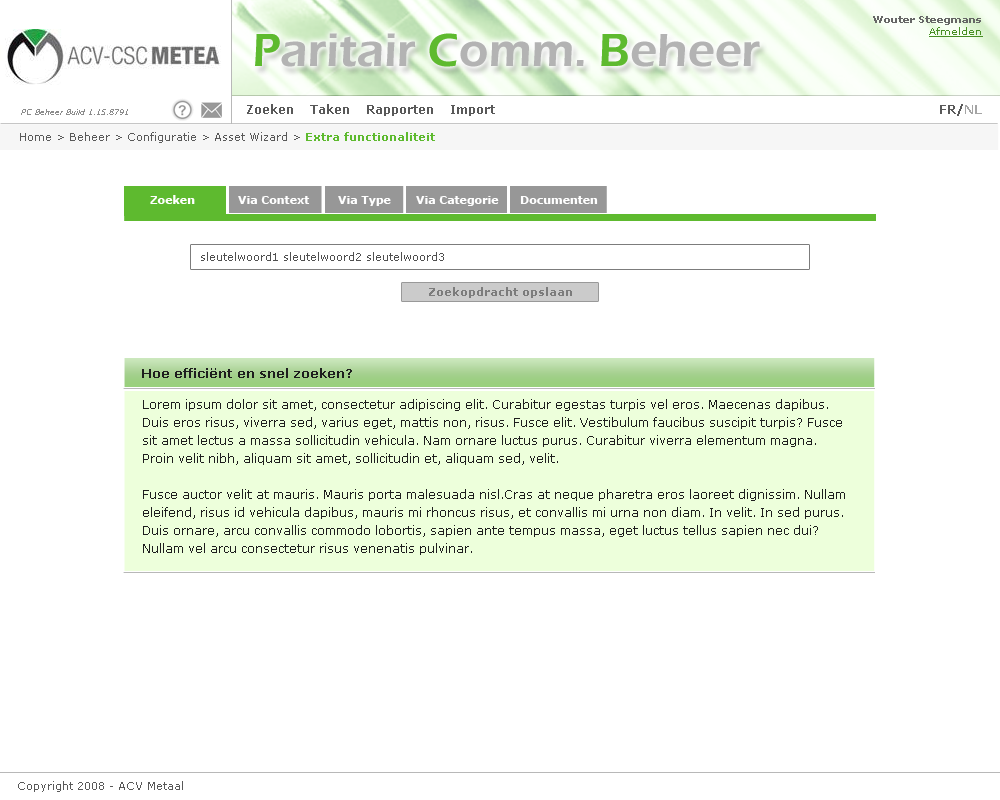
<style>
.page{position:relative;width:1000px;height:800px;background:#ffffff}
.page>*{position:absolute;margin:0}
.t1{font:10px "Verdana-Bold";color:#666666}
.t2{font:10px "Verdana";color:#488f24;text-decoration:underline}
.t3{font:48px "ErasITC-Demi";color:#b3b3b3}
.t4{font:48px "ErasITC-Demi";color:#5eba2f}
.t5{font:8px "Verdana-Italic";color:#8c8c8c}
.t6{font:12px "Verdana-Bold";color:#595959}
.t7{font:12px "Verdana-Bold";color:#a4a4a4}
.t8{font:11px "Verdana";color:#595959}
.t9{font:11px "Verdana-Bold";color:#5eba2f}
.t10{font:11px "Verdana-Bold";color:#ffffff}
.t11{font:11px "Verdana";color:#505050}
.t12{font:11px "Verdana-Bold";color:#7c7c7c}
.t13{font:13px "Verdana-Bold";color:#1e1e1e}
.t14{font:12px/18px "Verdana";color:#1e1e1e}
</style>
<div class="page">
<p class="t1" style="left:873px;top:16px;width:110px;height:21px;text-align:right">Wouter Steegmans<br><span class="t2">Afmelden</span></p>
<p class="t3" style="left:255px;top:33px;width:505px;height:34px"><span class="t4">P</span>aritair <span class="t4">C</span>omm. <span class="t4">B</span>eheer</p>
<p class="t5" style="left:21px;top:109px;width:107px;height:6px">PC Beheer Build 1.15.8791</p>
<p class="t6" style="left:247px;top:104px;width:248px;height:12px">Zoeken    Taken    Rapporten    Import</p>
<p class="t6" style="left:940px;top:104px;width:42px;height:12px">FR/<span class="t7">NL</span></p>
<p class="t8" style="left:20px;top:132px;width:415px;height:11px">Home &gt; Beheer &gt; Configuratie &gt; Asset Wizard &gt; <span class="t9">Extra functionaliteit</span></p>
<p class="t10" style="left:150px;top:195px;width:45px;height:9px">Zoeken</p>
<p class="t10" style="left:238px;top:196px;width:72px;height:8px">Via Context</p>
<p class="t10" style="left:338px;top:196px;width:53px;height:10px">Via Type</p>
<p class="t10" style="left:416px;top:196px;width:83px;height:10px">Via Categorie</p>
<p class="t10" style="left:520px;top:196px;width:78px;height:8px">Documenten</p>
<p class="t11" style="left:201px;top:252px;width:243px;height:9px">sleutelwoord1 sleutelwoord2 sleutelwoord3</p>
<p class="t12" style="left:429px;top:287px;width:143px;height:11px">Zoekopdracht opslaan</p>
<p class="t13" style="left:142px;top:368px;width:210px;height:10px">Hoe efficiënt en snel zoeken?</p>
<p class="t14" style="left:143px;top:399px;width:702px;height:156px">Lorem ipsum dolor sit amet, consectetur adipiscing elit. Curabitur egestas turpis vel eros. Maecenas dapibus. Duis eros risus, viverra sed, varius eget, mattis non, risus. Fusce elit. Vestibulum faucibus suscipit turpis? Fusce sit amet lectus a massa sollicitudin vehicula. Nam ornare luctus purus. Curabitur viverra elementum magna. Proin velit nibh, aliquam sit amet, sollicitudin et, aliquam sed, velit. <br><br>Fusce auctor velit at mauris. Mauris porta malesuada nisl.Cras at neque pharetra eros laoreet dignissim. Nullam eleifend, risus id vehicula dapibus, mauris mi rhoncus risus, et convallis mi urna non diam. In velit. In sed purus. Duis ornare, arcu convallis commodo lobortis, sapien ante tempus massa, eget luctus tellus sapien nec dui? Nullam vel arcu consectetur risus venenatis pulvinar.</p>
<p class="t8" style="left:18px;top:781px;width:165px;height:11px">Copyright 2008 - ACV Metaal</p>
</div>
